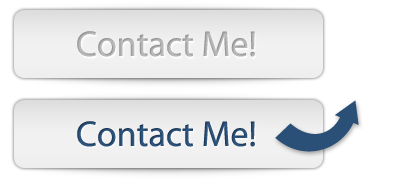
<style>
.page{position:relative;width:400px;height:180px;background:#ffffff}
.page>*{position:absolute;margin:0}
.t1{font:36px "MyriadPro-Regular";color:#bbbbbb}
.t2{font:36px "MyriadPro-Regular";color:#2e5782}
</style>
<div class="page">
<p class="t1" style="left:77px;top:31px;width:178px;height:26px">Contact Me!</p>
<p class="t2" style="left:77px;top:121px;width:178px;height:26px">Contact Me!</p>
</div>
